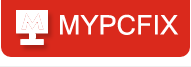
<style>
.page{position:relative;width:191px;height:67px;background:#da291c}
.page>*{position:absolute;margin:0}
.t1{font:30px "Raavi";color:#ffffff}
</style>
<div class="page">
<p class="t1" style="left:60px;top:14px;width:119px;height:21px">MYPCFIX</p>
</div>
